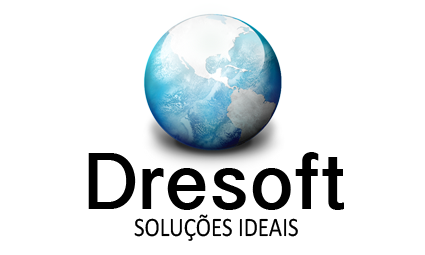
<style>
.page{position:relative;width:425px;height:255px;background:#ffffff}
.page>*{position:absolute;margin:0}
.t1{font:75.4px "TeluguSangamMN-Bold";color:#000000}
.t2{font:26.8px "Calibri";color:#000000;scale:0.86 1}
</style>
<div class="page">
<p class="t1" style="left:88px;top:152px;width:256px;height:58px">Dresoft</p>
<p class="t2" style="left:134px;top:214px;width:164px;height:27px">SOLUÇÕES IDEAIS</p>
</div>
